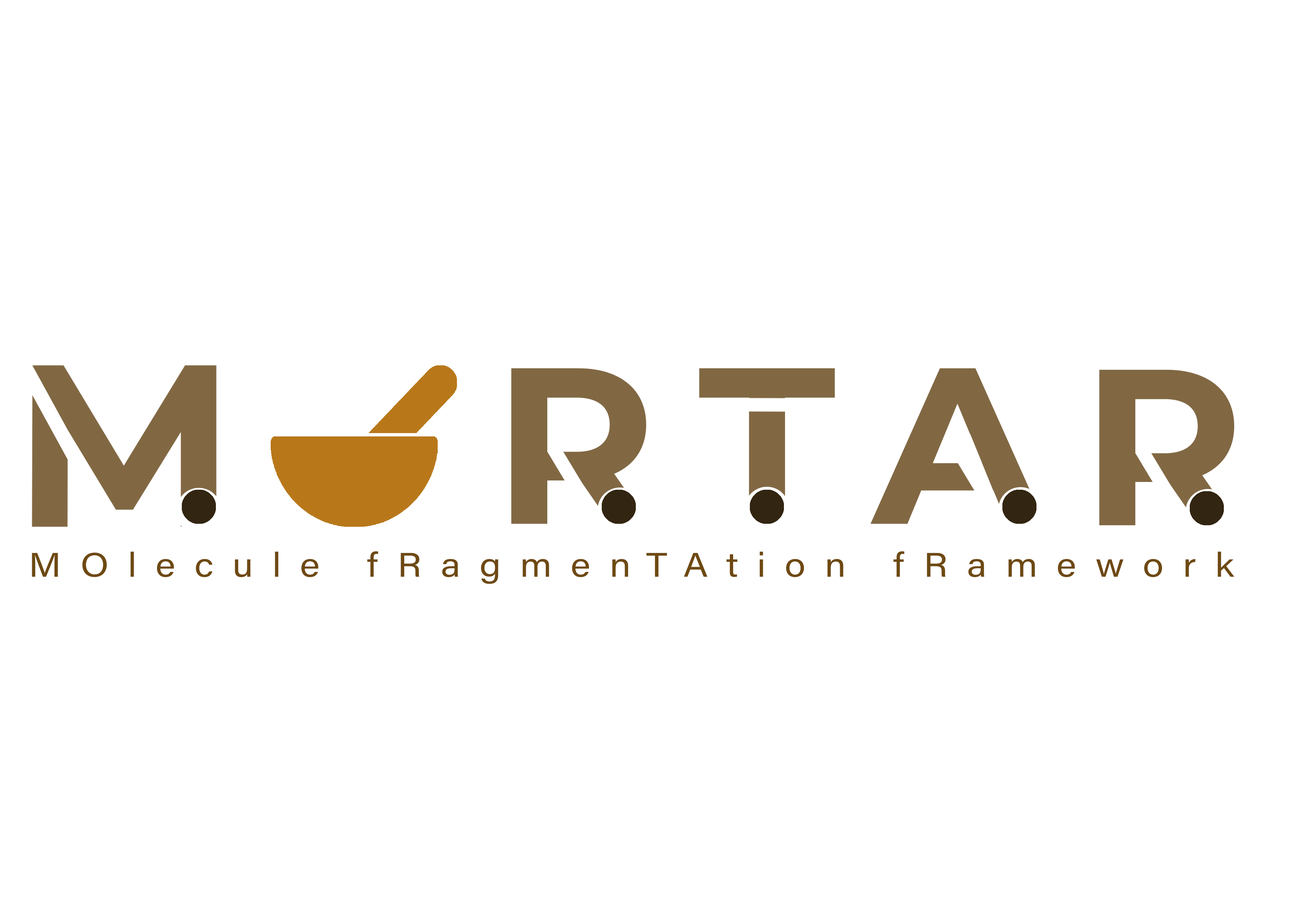
<style>
.page{position:relative;width:1299px;height:918px;background:#ffffff}
.page>*{position:absolute;margin:0}
.t1{font:34.2px "AcuminConcept-Regular";letter-spacing:0.5em;color:#6e4912;scale:1.11 1}
</style>
<div class="page">
<p class="t1" style="left:32px;top:551px;width:1202px;height:33px">MOlecule fRagmenTAtion fRamework</p>
</div>
